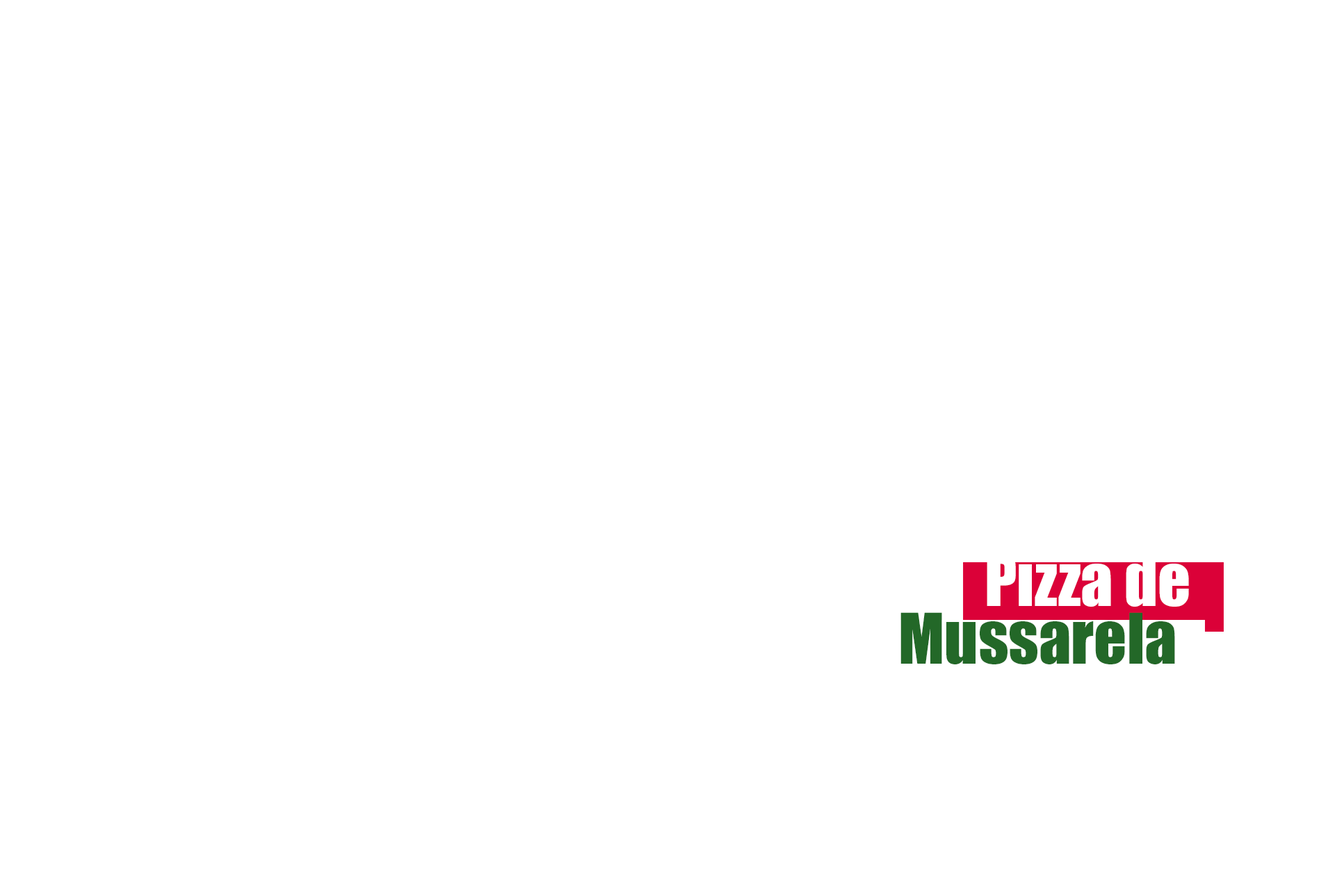
<style>
.page{position:relative;width:1335px;height:893px;background:#ffffff}
.page>*{position:absolute;margin:0}
.t1{font:64.3px "Impact";color:#ffffff}
.t2{font:64.3px "Impact";color:#236828}
</style>
<div class="page">
<p class="t1" style="left:987px;top:555px;width:202px;height:52px">Pizza de</p>
<p class="t2" style="left:900px;top:612px;width:275px;height:53px">Mussarela</p>
</div>
